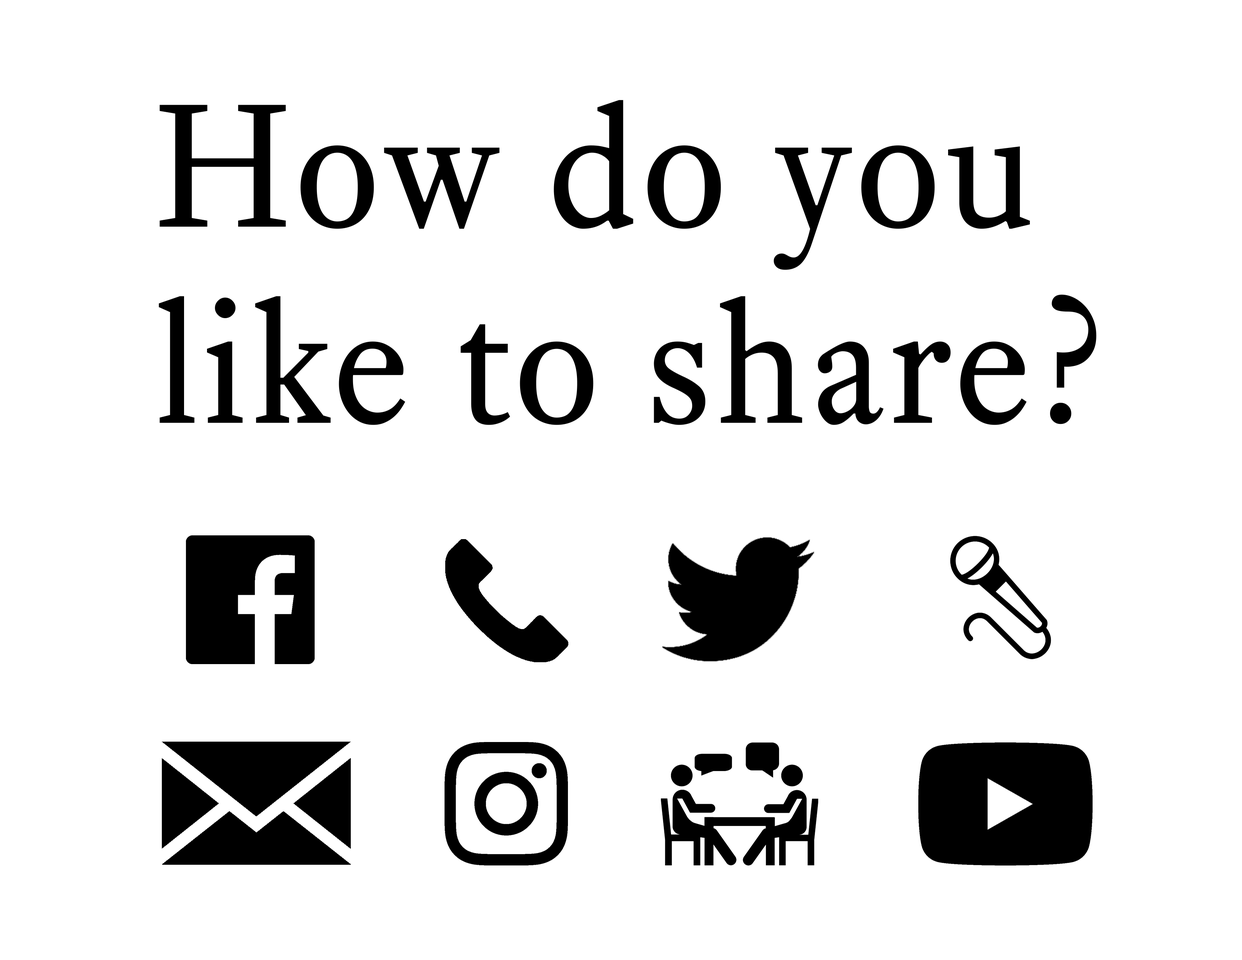
<style>
.page{position:relative;width:1242px;height:960px;background:#ffffff}
.page>*{position:absolute;margin:0}
.t1{font:172.5px/196.1px "EquityTextB";letter-spacing:0.025em;color:#000000}
</style>
<div class="page">
<p class="t1" style="left:159px;top:100px;width:938px;height:325px">How do you<br>like to share?</p>
</div>
